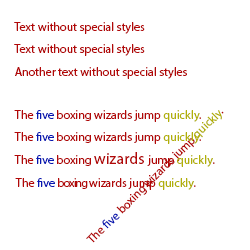
<style>
.page{position:relative;width:250px;height:250px;background:#ffffff}
.page>*{position:absolute;margin:0}
.t1{font:12px "MyriadPro-Regular";color:#b20808}
.t2{font:12px "MyriadPro-Regular";color:#0818b2}
.t3{font:12px "MyriadPro-Regular";color:#b2b008}
.t4{font:16px "MyriadPro-Regular";color:#b20808}
.t5{font:12px "MyriadPro-Regular";letter-spacing:-0.075em;color:#b20808}
</style>
<div class="page">
<p class="t1" style="left:14px;top:22px;width:131px;height:12px">Text without special styles</p>
<p class="t1" style="left:14px;top:44px;width:131px;height:12px">Text without special styles</p>
<p class="t1" style="left:15px;top:67px;width:172px;height:12px">Another text without special styles</p>
<p class="t1" style="left:14px;top:110px;width:187px;height:12px">The <span class="t2">five</span> boxing wizards jump <span class="t3">quickly</span>.</p>
<p class="t1" style="left:86px;top:110px;width:138px;height:133px;rotate:-45deg">The <span class="t2">five</span> boxing wizards jump <span class="t3">quickly</span>.</p>
<p class="t1" style="left:14px;top:132px;width:187px;height:12px">The <span class="t2">five</span> boxing wizards jump <span class="t3">quickly</span>.</p>
<p class="t4" style="left:14px;top:152px;width:201px;height:15px"><span class="t1">The </span><span class="t2">five</span><span class="t1"> boxing </span>wizards <span class="t1">jump </span><span class="t3">quickly</span><span class="t1">.</span></p>
<p class="t1" style="left:15px;top:178px;width:181px;height:12px">The <span class="t2">five </span><span class="t5">boxing </span>wizards jump <span class="t3">quickly</span>.</p>
</div>
